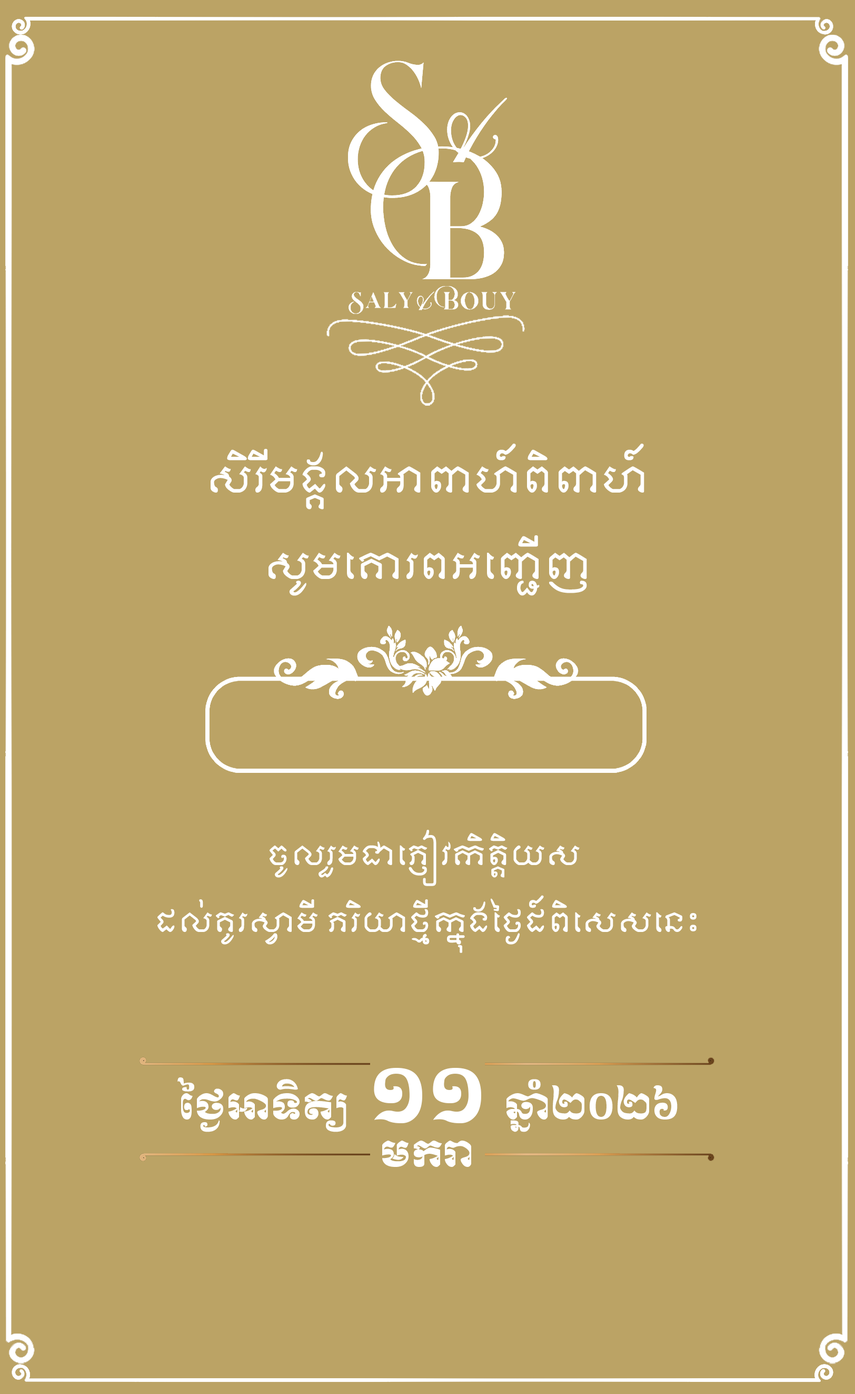
<style>
.page{position:relative;width:855px;height:1394px;background:#bba365}
.page>*{position:absolute;margin:0}
.t1{font:35.8px/3.9px "KhmerOSMoulpali";color:#ffffff}
.t2{font:35.8px "KhmerOSMoulpali";color:#ffffff}
.t3{font:26.7px/3.9px "KhmerOSMoulpali";color:#ffffff}
.t4{font:75.7px "Moul";color:#ffffff}
.t5{font:35.9px "KhmerOSMoul";color:#ffffff}
</style>
<div class="page">
<p class="t1" style="left:211px;top:444px;width:434px;height:65px;text-align:center">សិរីមង្គលអាពាហ៍ពិពាហ៍</p>
<p class="t2" style="left:269px;top:535px;width:318px;height:61px">សូមគោរពអញ្ជើញ</p>
<p class="t3" style="left:158px;top:830px;width:539px;height:123px;text-align:center">ចូលរួមជាភ្ញៀវកិត្តិយស <br><br><br><br><br><br><br><br><br><br><br><br><br><br><br><br><br>ដល់គូរស្វាមី ភរិយាថ្មីក្នុងថ្ងៃដ៍ពិសេសនេះ</p>
<p class="t4" style="left:374px;top:1068px;width:107px;height:55px">១១</p>
<p class="t5" style="left:178px;top:1077px;width:169px;height:55px">ថ្ងៃអាទិត្យ</p>
<p class="t5" style="left:507px;top:1079px;width:171px;height:53px">ឆ្នាំ២០២៦</p>
<p class="t5" style="left:382px;top:1140px;width:89px;height:27px">មករា</p>
</div>
